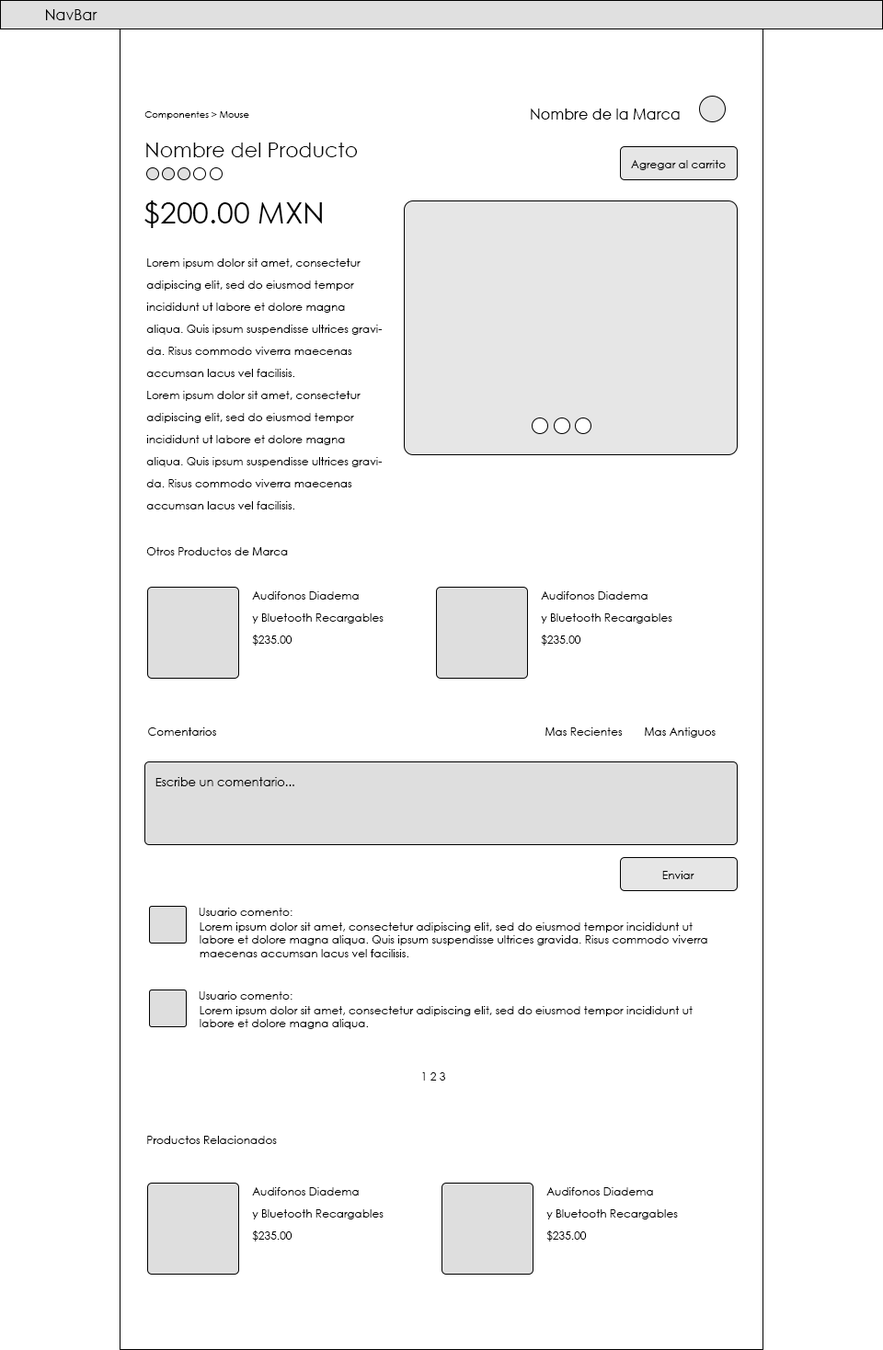
<style>
.page{position:relative;width:883px;height:1350px;background:#ffffff}
.page>*{position:absolute;margin:0}
.t1{font:14.7px "CenturyGothic";color:#000000}
.t2{font:9.2px "CenturyGothic";color:#000000}
.t3{font:20.2px "CenturyGothic";color:#000000}
.t4{font:11px "CenturyGothic";color:#000000}
.t5{font:29.4px "CenturyGothic";color:#000000}
.t6{font:11px/22.1px "CenturyGothic";color:#000000}
.t7{font:12px "CenturyGothic";color:#000000}
</style>
<div class="page">
<p class="t1" style="left:46px;top:9px;width:52px;height:11px">NavBar</p>
<p class="t2" style="left:144px;top:111px;width:105px;height:9px">Componentes &gt; Mouse</p>
<p class="t1" style="left:531px;top:109px;width:149px;height:11px">Nombre de la Marca</p>
<p class="t3" style="left:146px;top:143px;width:212px;height:14px">Nombre del Producto</p>
<p class="t4" style="left:631px;top:160px;width:95px;height:10px">Agregar al carrito</p>
<p class="t5" style="left:144px;top:201px;width:178px;height:27px">$200.00 MXN</p>
<p class="t6" style="left:146px;top:258px;width:236px;height:252px">Lorem ipsum dolor sit amet, consectetur adipiscing elit, sed do eiusmod tempor incididunt ut labore et dolore magna aliqua. Quis ipsum suspendisse ultrices gravida. Risus commodo viverra maecenas accumsan lacus vel facilisis. <br>Lorem ipsum dolor sit amet, consectetur adipiscing elit, sed do eiusmod tempor incididunt ut labore et dolore magna aliqua. Quis ipsum suspendisse ultrices gravida. Risus commodo viverra maecenas accumsan lacus vel facilisis.</p>
<p class="t4" style="left:146px;top:547px;width:142px;height:9px">Otros Productos de Marca</p>
<p class="t6" style="left:252px;top:591px;width:132px;height:55px">Audifonos Diadema<br>y Bluetooth Recargables<br>$235.00</p>
<p class="t6" style="left:541px;top:591px;width:131px;height:55px">Audifonos Diadema<br>y Bluetooth Recargables<br>$235.00</p>
<p class="t4" style="left:148px;top:728px;width:568px;height:10px">Comentarios          Mas Recientes Mas Antiguos</p>
<p class="t7" style="left:155px;top:777px;width:139px;height:9px">Escribe un comentario...</p>
<p class="t4" style="left:662px;top:871px;width:32px;height:8px">Enviar</p>
<p class="t4" style="left:199px;top:908px;width:94px;height:8px">Usuario comento:</p>
<p class="t4" style="left:200px;top:923px;width:507px;height:35px">Lorem ipsum dolor sit amet, consectetur adipiscing elit, sed do eiusmod tempor incididunt ut labore et dolore magna aliqua. Quis ipsum suspendisse ultrices gravida. Risus commodo viverra maecenas accumsan lacus vel facilisis.</p>
<p class="t4" style="left:199px;top:992px;width:94px;height:8px">Usuario comento:</p>
<p class="t4" style="left:200px;top:1006px;width:493px;height:23px">Lorem ipsum dolor sit amet, consectetur adipiscing elit, sed do eiusmod tempor incididunt ut labore et dolore magna aliqua.</p>
<p class="t4" style="left:422px;top:1073px;width:23px;height:8px">1 2 3</p>
<p class="t4" style="left:147px;top:1136px;width:130px;height:8px">Productos Relacionados</p>
<p class="t6" style="left:252px;top:1188px;width:132px;height:54px">Audifonos Diadema<br>y Bluetooth Recargables<br>$235.00</p>
<p class="t6" style="left:546px;top:1188px;width:132px;height:54px">Audifonos Diadema<br>y Bluetooth Recargables<br>$235.00</p>
</div>
